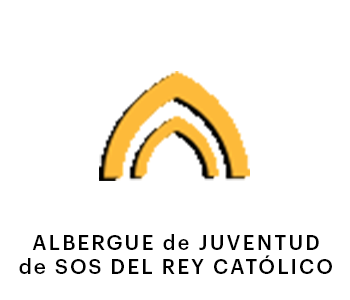
<style>
.page{position:relative;width:350px;height:300px;background:#ffffff}
.page>*{position:absolute;margin:0}
.t1{font:20.6px "Graphik-Medium";letter-spacing:0.1em;color:#000000}
</style>
<div class="page">
<p class="t1" style="left:19px;top:234px;width:313px;height:40px;text-align:center">ALBERGUE de JUVENTUD<br>de SOS DEL REY CATÓLICO</p>
</div>
